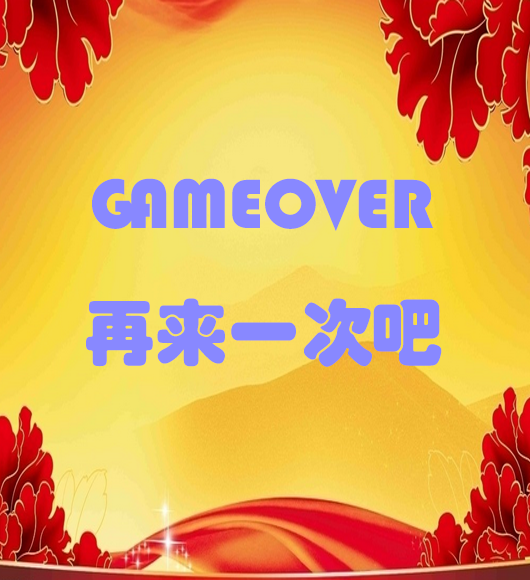
<style>
.page{position:relative;width:530px;height:580px}
.page>*{position:absolute;margin:0}
.t1{font:72px "STHupo";color:#8888ff}
</style>
<div class="page">
<p class="t1" style="left:86px;top:178px;width:356px;height:189px">GAMEOVER<br>再来一次吧</p>
</div>
